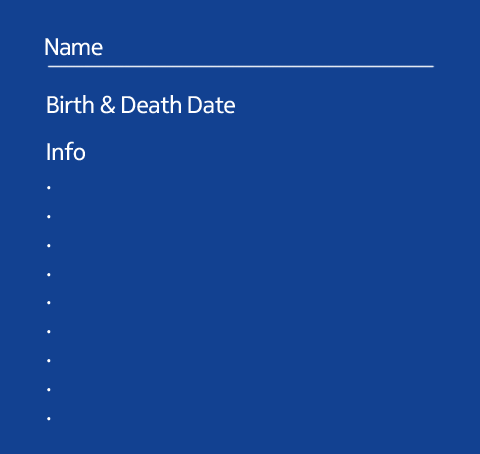
<style>
.page{position:relative;width:480px;height:454px;background:#124191}
.page>*{position:absolute;margin:0}
.t1{font:24px "NokiaPureHeadline-Regular";color:#ffffff}
.t2{font:24px "NokiaPureHeadline-Regular";letter-spacing:0.005em;color:#ffffff}
</style>
<div class="page">
<p class="t1" style="left:45px;top:38px;width:58px;height:18px">Name</p>
<p class="t1" style="left:47px;top:95px;width:188px;height:19px">Birth &amp; Death Date</p>
<p class="t2" style="left:47px;top:141px;width:38px;height:280px">Info<br>.<br>.<br>.<br>.<br>.<br>.<br>.<br>.<br>.</p>
</div>
